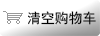
<style>
.page{position:relative;width:100px;height:36px;background:#ffffff}
.page>*{position:absolute;margin:0}
.t1{font:14px "SimHei";color:#000000}
</style>
<div class="page">
<p class="t1" style="left:27px;top:11px;width:69px;height:14px">清空购物车</p>
</div>
